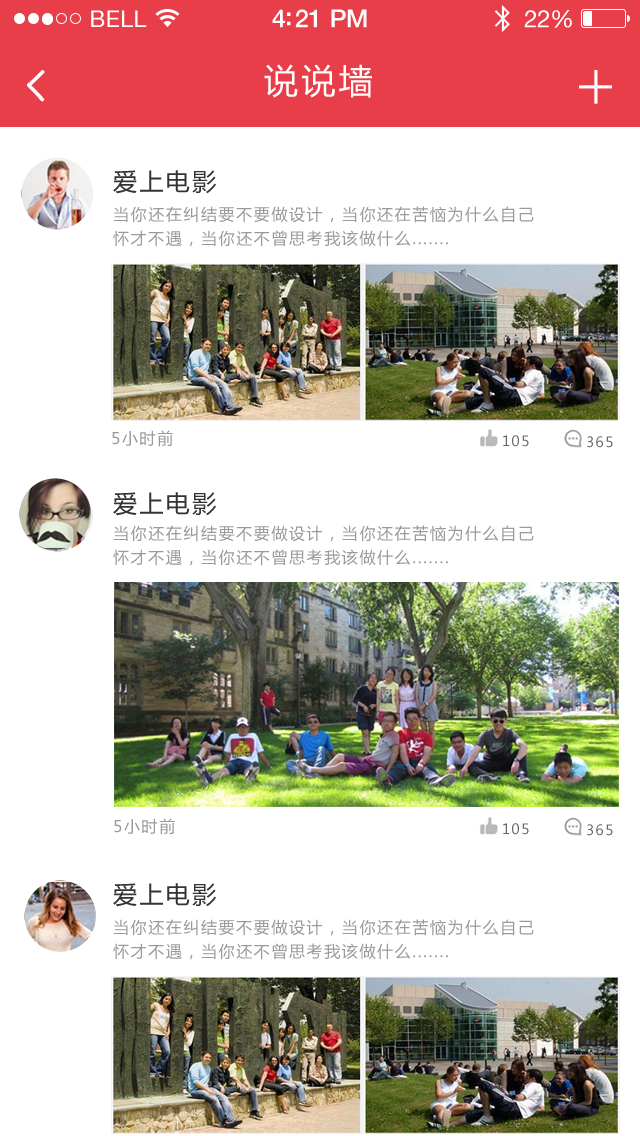
<style>
.page{position:relative;width:640px;height:1136px;background:#ffffff}
.page>*{position:absolute;margin:0}
.t1{font:23px "HelveticaNeue";letter-spacing:0.02em;color:#ffffff}
.t2{font:25px "HelveticaNeue-Medium";letter-spacing:-0.02em;color:#ffffff}
.t3{font:24px "HelveticaNeue";letter-spacing:-0.02em;color:#ffffff}
.t4{font:34px "MicrosoftYaHei";letter-spacing:0.1em;color:#ffffff}
.t5{font:24px "MicrosoftYaHei";letter-spacing:0.1em;color:#333333}
.t6{font:16px/24px "MicrosoftYaHei";letter-spacing:0.1em;color:#9a9a9a}
.t7{font:16px "MicrosoftYaHei";letter-spacing:0.1em;color:#9a9a9a}
</style>
<div class="page">
<p class="t1" style="left:91px;top:10px;width:56px;height:17px">BELL</p>
<p class="t2" style="left:272px;top:9px;width:95px;height:19px">4:21 PM</p>
<p class="t3" style="left:524px;top:10px;width:48px;height:18px">22%</p>
<p class="t4" style="left:264px;top:64px;width:108px;height:34px">说说墙</p>
<p class="t5" style="left:113px;top:170px;width:103px;height:24px">爱上电影</p>
<p class="t6" style="left:113px;top:206px;width:421px;height:41px">当你还在纠结要不要做设计，当你还在苦恼为什么自己<br>怀才不遇，当你还不曾思考我该做什么.......</p>
<p class="t7" style="left:112px;top:430px;width:61px;height:17px">5小时前</p>
<p class="t5" style="left:113px;top:492px;width:103px;height:24px">爱上电影</p>
<p class="t6" style="left:113px;top:525px;width:421px;height:41px">当你还在纠结要不要做设计，当你还在苦恼为什么自己<br>怀才不遇，当你还不曾思考我该做什么.......</p>
<p class="t7" style="left:114px;top:818px;width:61px;height:17px">5小时前</p>
<p class="t5" style="left:113px;top:883px;width:103px;height:24px">爱上电影</p>
<p class="t6" style="left:113px;top:919px;width:421px;height:41px">当你还在纠结要不要做设计，当你还在苦恼为什么自己<br>怀才不遇，当你还不曾思考我该做什么.......</p>
</div>
